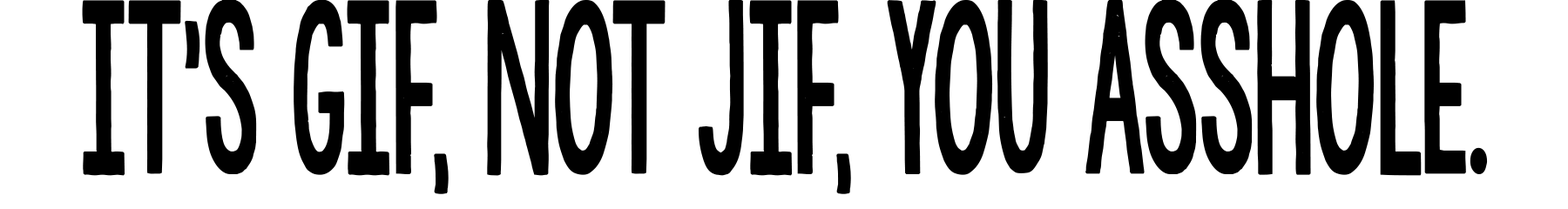
<style>
.page{position:relative;width:1568px;height:209px;background:#ffffff}
.page>*{position:absolute;margin:0}
.t1{font:192.6px "KGAllofMe";letter-spacing:-0.05em;color:#000000;text-transform:uppercase;font-weight:bold;scale:0.58 1}
</style>
<div class="page">
<p class="t1" style="left:82px;top:0px;width:1406px;height:194px">It's gif, not jif, you asshole.</p>
</div>
